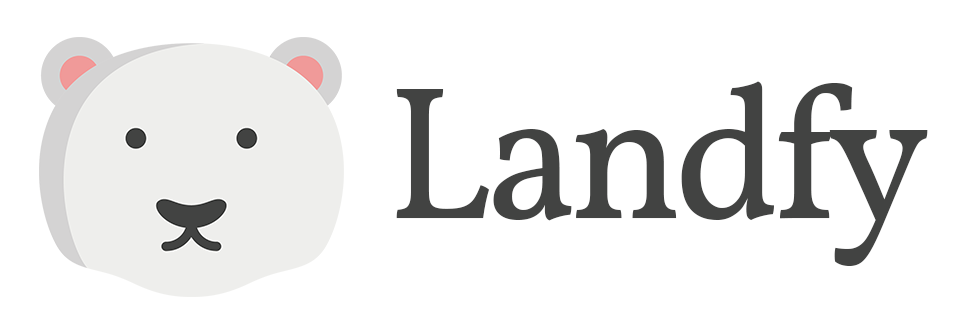
<style>
.page{position:relative;width:966px;height:334px;background:#ffffff}
.page>*{position:absolute;margin:0}
.t1{font:191.2px "Vollkorn-Regular";letter-spacing:-0.05em;color:#424342}
</style>
<div class="page">
<p class="t1" style="left:396px;top:81px;width:532px;height:185px">Landfy</p>
</div>
